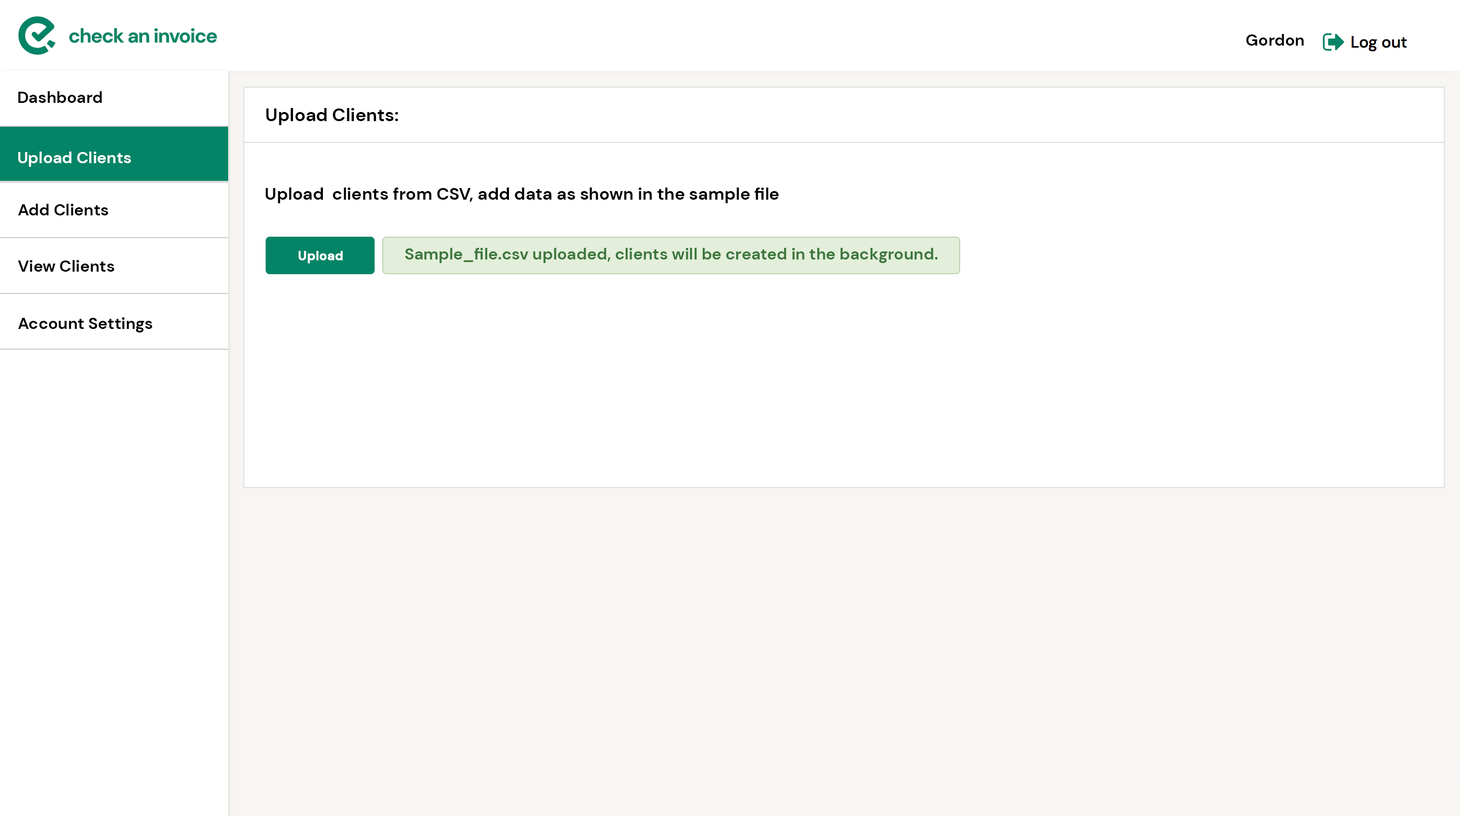
<style>
.page{position:relative;width:1460px;height:816px;background:#ffffff}
.page>*{position:absolute;margin:0}
.t1{font:16.2px "DMSans-Bold";color:#000000}
.t2{font:18.3px "DMSans-Bold";color:#010101}
.t3{font:16.2px "DMSans-Bold";color:#ffffff}
.t4{font:17.2px "DMSans-Bold";color:#000000}
.t5{font:12.7px "DMSans-Bold";color:#ffffff;font-weight:bold}
.t6{font:16.2px "DMSans-Bold";color:#3c763d}
</style>
<div class="page">
<p class="t1" style="left:1246px;top:34px;width:58px;height:12px">Gordon</p>
<p class="t1" style="left:18px;top:91px;width:84px;height:12px">Dashboard</p>
<p class="t2" style="left:266px;top:108px;width:133px;height:17px">Upload Clients:</p>
<p class="t3" style="left:18px;top:152px;width:113px;height:15px">Upload Clients</p>
<p class="t4" style="left:266px;top:188px;width:513px;height:15px">Upload  clients from CSV, add data as shown in the sample file</p>
<p class="t1" style="left:18px;top:204px;width:91px;height:12px">Add Clients</p>
<p class="t5" style="left:299px;top:251px;width:44px;height:13px">Upload</p>
<p class="t6" style="left:405px;top:248px;width:533px;height:15px">Sample_file.csv uploaded, clients will be created in the background.</p>
<p class="t1" style="left:18px;top:260px;width:97px;height:12px">View Clients</p>
<p class="t1" style="left:18px;top:317px;width:135px;height:16px">Account Settings</p>
</div>
